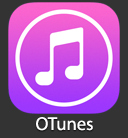
<style>
.page{position:relative;width:128px;height:138px;background:#333333}
.page>*{position:absolute;margin:0}
.t1{font:18.6px "MyriadPro-Regular";color:#ffffff}
</style>
<div class="page">
<p class="t1" style="left:36px;top:117px;width:57px;height:14px">OTunes</p>
</div>
